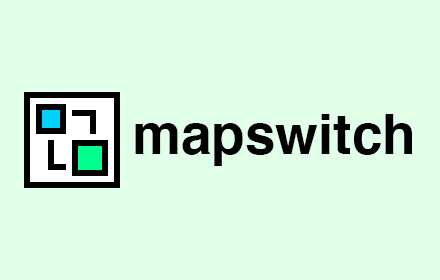
<style>
.page{position:relative;width:440px;height:280px;background:#e2ffea}
.page>*{position:absolute;margin:0}
.t1{font:55px "Helvetica-Bold";color:#000000}
</style>
<div class="page">
<p class="t1" style="left:135px;top:114px;width:277px;height:52px">mapswitch</p>
</div>
